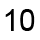
<style>
.page{position:relative;width:40px;height:40px;background:#ffffff}
.page>*{position:absolute;margin:0}
.t1{font:30px "ArialMT";color:#000000}
</style>
<div class="page">
<p class="t1" style="left:5px;top:9px;width:30px;height:22px">10</p>
</div>
